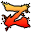
<style>
.page{position:relative;width:32px;height:32px;background:#ffffff}
.page>*{position:absolute;margin:0}
.t1{font:33.3px "ShogunsClan"}
</style>
<div class="page">
<p class="t1" style="left:1px;top:1px;width:29px;height:30px">Z</p>
</div>
